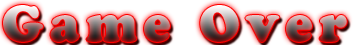
<style>
.page{position:relative;width:360px;height:45px;background:#ffffff}
.page>*{position:absolute;margin:0}
.t1{font:50px "CooperBlackStd";letter-spacing:0.125em}
</style>
<div class="page">
<p class="t1" style="left:3px;top:5px;width:344px;height:37px">Game Over</p>
</div>
